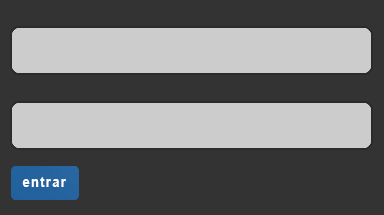
<style>
.page{position:relative;width:384px;height:215px;background:#333333}
.page>*{position:absolute;margin:0}
.t1{font:15.2px "Arial-BoldMT";letter-spacing:0.1em;color:#ffffff;scale:0.85 1}
</style>
<div class="page">
<p class="t1" style="left:22px;top:177px;width:44px;height:10px">entrar</p>
</div>
